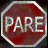
<style>
.page{position:relative;width:48px;height:48px}
.page>*{position:absolute;margin:0}
.t1{font:20px "Tahoma";text-transform:uppercase;scale:0.85 1}
</style>
<div class="page">
<p class="t1" style="left:5px;top:16px;width:39px;height:16px">PARE</p>
</div>
